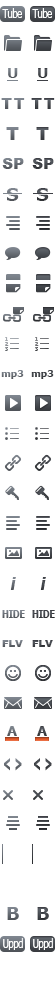
<style>
.page{position:relative;width:55px;height:1000px;background:#ffffff}
.page>*{position:absolute;margin:0}
.t1{font:12px "Verdana";letter-spacing:-0.1em;color:#fefefe;scale:0.77 1}
.t2{font:14px "Verdana-Bold"}
.t3{font:14px "Verdana-Bold";color:#43474c}
.t4{font:15px "Arial-Black";letter-spacing:0.1em;text-transform:uppercase}
.t5{font:15px "Arial-Black";letter-spacing:0.1em;color:#44484d}
.t6{font:18px "Arial-Black";letter-spacing:0.1em;color:#7a8089}
.t7{font:18px "Arial-Black";letter-spacing:0.1em;color:#4c5156}
.t8{font:15px "Arial-Black"}
.t9{font:15px "Arial-Black";color:#45494d}
.t10{font:18px "Verdana-Bold"}
.t11{font:10px "Tahoma-Bold";color:#6a6f77}
.t12{font:10px "Tahoma-Bold";color:#3d4146}
.t13{font:18px "Arial-BoldItalicMT";letter-spacing:0.1em}
.t14{font:18px "Arial-BoldItalicMT";letter-spacing:0.1em;color:#404449}
.t15{font:11px "Tahoma-Bold";letter-spacing:-0.05em;color:#6e747b;text-transform:uppercase;scale:0.86 1}
.t16{font:11px "Tahoma-Bold";letter-spacing:-0.05em;color:#3e4145;text-transform:uppercase;scale:0.86 1}
.t17{font:14px "Arial-Black";font-variant:small-caps}
.t18{font:14px "Arial-Black";color:#3f4147;font-variant:small-caps}
.t19{font:14px "Verdana-Bold";letter-spacing:0.075em;color:#666c73;scale:0.9 1}
.t20{font:14px "Verdana-Bold";letter-spacing:0.075em;color:#41454a;scale:0.9 1}
.t21{font:18px "Verdana-Bold";color:#666c73;font-weight:bold;scale:0.5 1}
.t22{font:18px "Verdana-Bold";color:#42454a;font-weight:bold;scale:0.5 1}
.t23{font:18px "Verdana-Bold";color:#43474c}
</style>
<div class="page">
<p class="t1" style="left:2px;top:8px;width:20px;height:10px">Tube</p>
<p class="t1" style="left:32px;top:8px;width:20px;height:10px">Tube</p>
<p class="t2" style="left:8px;top:68px;width:10px;height:10px">U</p>
<p class="t3" style="left:38px;top:68px;width:10px;height:10px">U</p>
<p class="t4" style="left:1px;top:98px;width:24px;height:11px">TT</p>
<p class="t5" style="left:31px;top:98px;width:24px;height:11px">TT</p>
<p class="t6" style="left:6px;top:127px;width:13px;height:13px">T</p>
<p class="t7" style="left:36px;top:127px;width:13px;height:13px">T</p>
<p class="t8" style="left:2px;top:158px;width:22px;height:11px">SP</p>
<p class="t9" style="left:32px;top:158px;width:22px;height:11px">SP</p>
<p class="t10" style="left:7px;top:188px;width:12px;height:13px">S</p>
<p class="t10" style="left:37px;top:188px;width:12px;height:13px">S</p>
<p class="t11" style="left:1px;top:370px;width:23px;height:9px">mp3</p>
<p class="t12" style="left:31px;top:370px;width:23px;height:9px">mp3</p>
<p class="t13" style="left:10px;top:577px;width:6px;height:13px">i</p>
<p class="t14" style="left:40px;top:577px;width:6px;height:13px">i</p>
<p class="t15" style="left:2px;top:610px;width:23px;height:8px">hide</p>
<p class="t16" style="left:32px;top:610px;width:23px;height:8px">hide</p>
<p class="t17" style="left:2px;top:640px;width:21px;height:7px">flv</p>
<p class="t18" style="left:32px;top:640px;width:21px;height:7px">flv</p>
<p class="t19" style="left:7px;top:726px;width:10px;height:10px">A</p>
<p class="t20" style="left:37px;top:726px;width:10px;height:10px">A</p>
<p class="t21" style="left:4px;top:758px;width:18px;height:13px">&lt; &gt;</p>
<p class="t22" style="left:34px;top:758px;width:18px;height:13px">&lt; &gt;</p>
<p class="t10" style="left:7px;top:907px;width:12px;height:13px">B</p>
<p class="t23" style="left:37px;top:907px;width:12px;height:13px">B</p>
<p class="t1" style="left:3px;top:938px;width:20px;height:12px">Uppd</p>
<p class="t1" style="left:33px;top:938px;width:20px;height:12px">Uppd</p>
</div>
